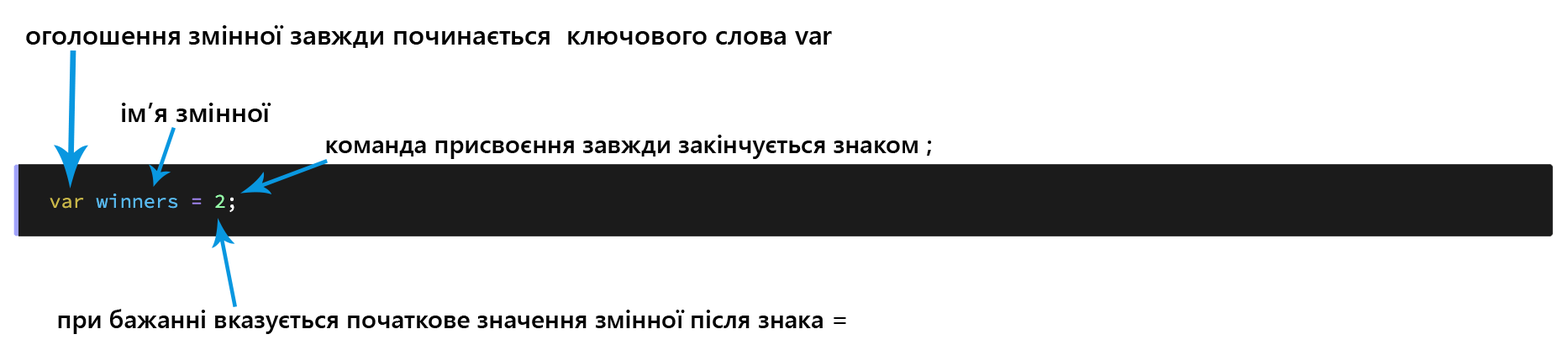
<style>
.page{position:relative;width:1568px;height:345px;background:#ffffff}
.page>*{position:absolute;margin:0}
.t1{font:26.9px "SegoeUI-SemiBold";color:#000000}
.t2{font:25.2px "SegoeUI-SemiBold";color:#000000}
</style>
<div class="page">
<p class="t1" style="left:26px;top:25px;width:806px;height:23px">оголошення змінної завжди починається  ключового слова var</p>
<p class="t1" style="left:122px;top:103px;width:149px;height:19px">ім’я змінної</p>
<p class="t2" style="left:326px;top:134px;width:606px;height:25px">команда присвоєння завжди закінчується знаком ;</p>
<p class="t2" style="left:58px;top:308px;width:788px;height:26px">при бажанні вказується початкове значення змінної після знака =</p>
</div>
